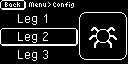
<style>
.page{position:relative;width:128px;height:64px;background:#000000}
.page>*{position:absolute;margin:0}
.t1{font:8px "6pxNormal";color:#ffffff}
.t2{font:16px "PixelOperator";color:#ffffff}
</style>
<div class="page">
<p class="t1" style="left:5px;top:2px;width:15px;height:5px">Back</p>
<p class="t1" style="left:29px;top:2px;width:17px;height:5px">Menu</p>
<p class="t1" style="left:48px;top:2px;width:3px;height:5px">&gt;</p>
<p class="t1" style="left:53px;top:2px;width:21px;height:6px">Config</p>
<p class="t2" style="left:18px;top:14px;width:29px;height:11px">Leg 1</p>
<p class="t2" style="left:18px;top:32px;width:30px;height:11px">Leg 2</p>
<p class="t2" style="left:18px;top:50px;width:30px;height:11px">Leg 3</p>
</div>
